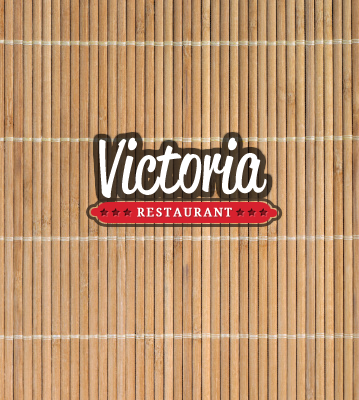
<style>
.page{position:relative;width:359px;height:400px}
.page>*{position:absolute;margin:0}
.t1{font:72px "ReklameScript-RegularDEMO";color:#ffffff}
.t2{font:12px "DroidSerif";letter-spacing:0.12em;color:#ffffff;text-transform:uppercase;font-weight:bold}
</style>
<div class="page">
<p class="t1" style="left:99px;top:137px;width:168px;height:61px">Victoria</p>
<p class="t2" style="left:137px;top:207px;width:95px;height:10px">restaurant</p>
</div>
